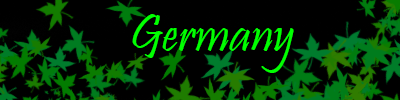
<style>
.page{position:relative;width:400px;height:100px;background:#000000}
.page>*{position:absolute;margin:0}
.t1{font:54px "Pristina-Regular";color:#00ff00}
</style>
<div class="page">
<p class="t1" style="left:132px;top:14px;width:162px;height:59px">Germany</p>
</div>
